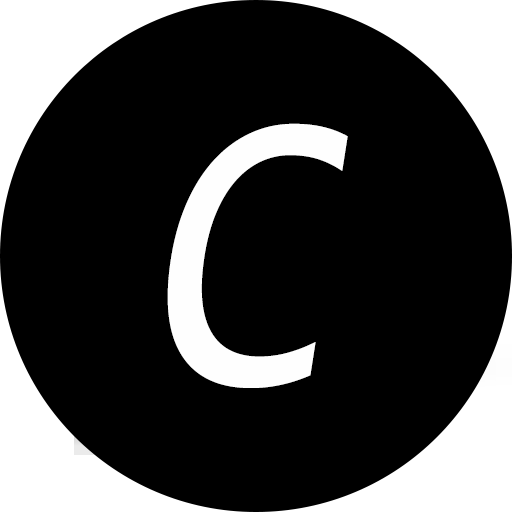
<style>
.page{position:relative;width:512px;height:512px;background:#000000}
.page>*{position:absolute;margin:0}
.t1{font:403.9px "Consolas";letter-spacing:0.025em;color:#fefefe;font-style:italic;scale:0.88 1}
</style>
<div class="page">
<p class="t1" style="left:167px;top:123px;width:181px;height:265px">C</p>
</div>
